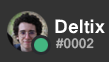
<style>
.page{position:relative;width:109px;height:62px;background:#333333}
.page>*{position:absolute;margin:0}
.t1{font:20.8px "Vrinda-Bold";color:#ffffff}
.t2{font:14.8px "Vrinda-Bold";color:#b2b2b2}
</style>
<div class="page">
<p class="t1" style="left:55px;top:19px;width:50px;height:15px">Deltix</p>
<p class="t2" style="left:55px;top:38px;width:39px;height:11px">#0002</p>
</div>
